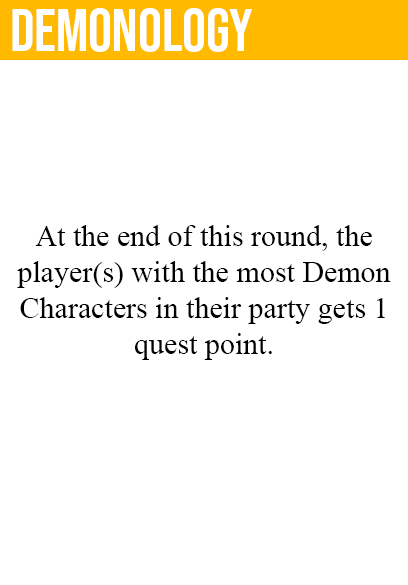
<style>
.page{position:relative;width:408px;height:585px;background:#ffffff}
.page>*{position:absolute;margin:0}
.t1{font:60px "BebasNeue-Regular";color:#ffffff}
.t2{font:30px "TimesNewRomanPSMT";color:#000000}
</style>
<div class="page">
<p class="t1" style="left:12px;top:8px;width:240px;height:44px">demonology</p>
<p class="t2" style="left:17px;top:225px;width:374px;height:135px;text-align:center">At the end of this round, the<br>player(s) with the most Demon<br>Characters in their party gets 1<br>quest point.</p>
</div>
